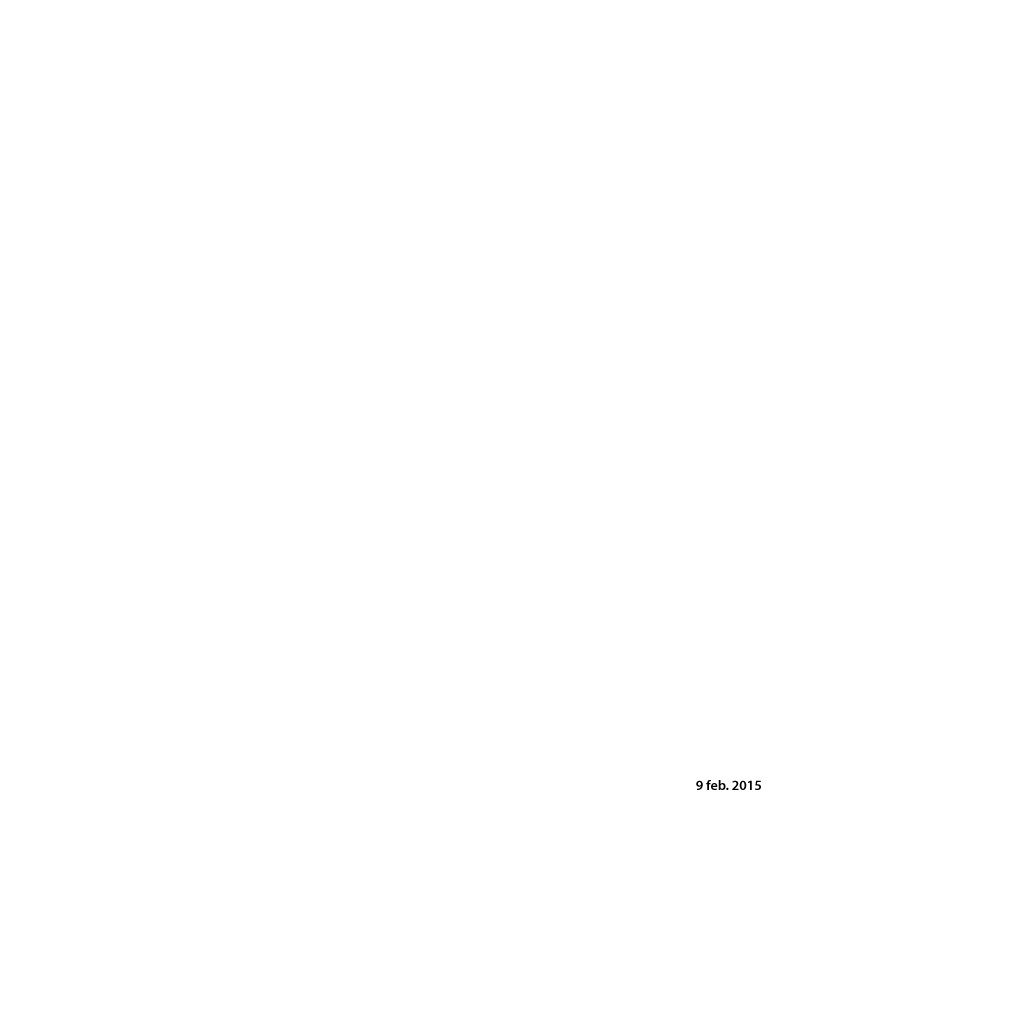
<style>
.page{position:relative;width:1020px;height:1020px;background:#ffffff}
.page>*{position:absolute;margin:0}
.t1{font:14px "MyriadPro-Semibold";color:#000000}
</style>
<div class="page">
<p class="t1" style="left:696px;top:780px;width:65px;height:10px">9 feb. 2015</p>
</div>
